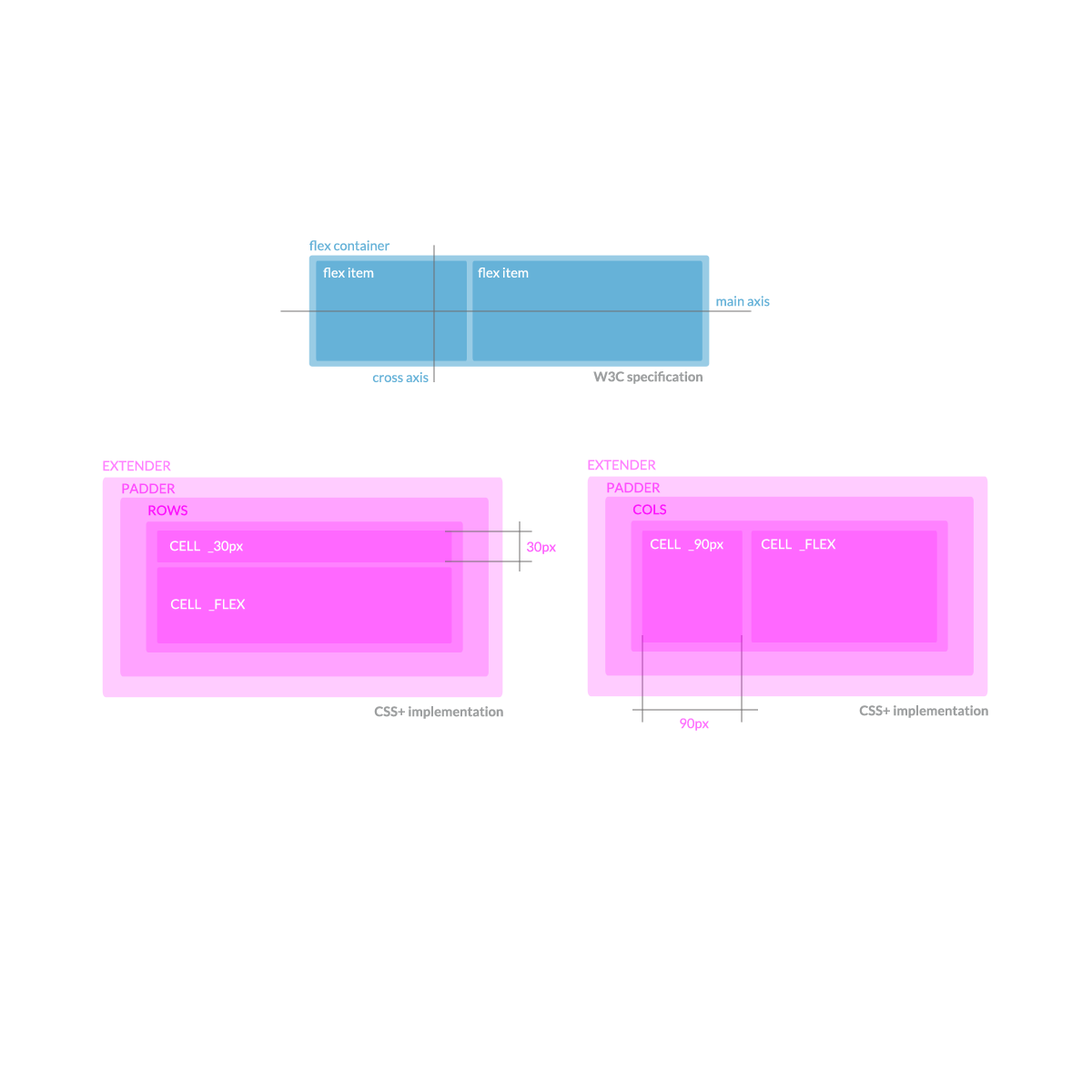
<style>
.page{position:relative;width:1092px;height:1092px;background:#ffffff}
.page>*{position:absolute;margin:0}
.t1{font:13.4px "Lato-Regular";color:#66b2d8}
.t2{font:13.4px "Lato-Regular";color:#ffffff}
.t3{font:13.4px "Lato-Bold";color:#9d9fa0}
.t4{font:13.4px "Lato-Regular";color:#ff82ff}
.t5{font:13.4px "Lato-Regular";color:#fe63fe}
.t6{font:13.4px "Lato-Regular";color:#fb1cfb}
.t7{font:13.4px "Lato-Regular";color:#fdfdfd}
</style>
<div class="page">
<p class="t1" style="left:309px;top:240px;width:81px;height:11px">flex container</p>
<p class="t2" style="left:323px;top:268px;width:51px;height:10px">flex item</p>
<p class="t2" style="left:478px;top:268px;width:51px;height:10px">flex item</p>
<p class="t1" style="left:716px;top:296px;width:54px;height:11px">main axis</p>
<p class="t1" style="left:372px;top:372px;width:57px;height:10px">cross axis</p>
<p class="t3" style="left:593px;top:371px;width:110px;height:13px">W3C specification</p>
<p class="t4" style="left:103px;top:460px;width:68px;height:11px">EXTENDER</p>
<p class="t4" style="left:588px;top:460px;width:68px;height:10px">EXTENDER</p>
<p class="t5" style="left:122px;top:483px;width:54px;height:11px">PADDER</p>
<p class="t5" style="left:607px;top:482px;width:54px;height:11px">PADDER</p>
<p class="t6" style="left:148px;top:505px;width:39px;height:11px">ROWS</p>
<p class="t6" style="left:632px;top:504px;width:34px;height:11px">COLS</p>
<p class="t7" style="left:169px;top:541px;width:74px;height:12px">CELL   _30px</p>
<p class="t5" style="left:527px;top:541px;width:29px;height:13px">30px</p>
<p class="t7" style="left:650px;top:539px;width:73px;height:12px">CELL   _90px</p>
<p class="t7" style="left:761px;top:539px;width:75px;height:12px">CELL   _FLEX</p>
<p class="t7" style="left:170px;top:599px;width:76px;height:13px">CELL   _FLEX</p>
<p class="t3" style="left:374px;top:706px;width:129px;height:13px">CSS+ implementation</p>
<p class="t3" style="left:859px;top:705px;width:129px;height:13px">CSS+ implementation</p>
<p class="t5" style="left:680px;top:718px;width:29px;height:13px;opacity:0.9">90px</p>
</div>
